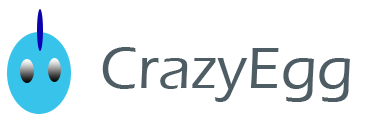
<style>
.page{position:relative;width:380px;height:138px;background:#ffffff}
.page>*{position:absolute;margin:0}
.t1{font:60px "ErasITC-Medium";color:#4e5c64}
</style>
<div class="page">
<p class="t1" style="left:102px;top:47px;width:248px;height:55px">CrazyEgg</p>
</div>
